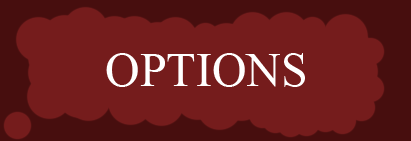
<style>
.page{position:relative;width:411px;height:141px;background:#751c1c}
.page>*{position:absolute;margin:0}
.t1{font:48px "TimesNewRomanPSMT";color:#ffffff}
</style>
<div class="page">
<p class="t1" style="left:106px;top:53px;width:199px;height:34px">OPTIONS</p>
</div>
